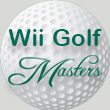
<style>
.page{position:relative;width:110px;height:110px}
.page>*{position:absolute;margin:0}
.t1{font:24.4px "ArialRoundedMTBold";color:#006c55}
</style>
<div class="page">
<p class="t1" style="left:8px;top:29px;width:94px;height:17px">Wii Golf</p>
</div>
